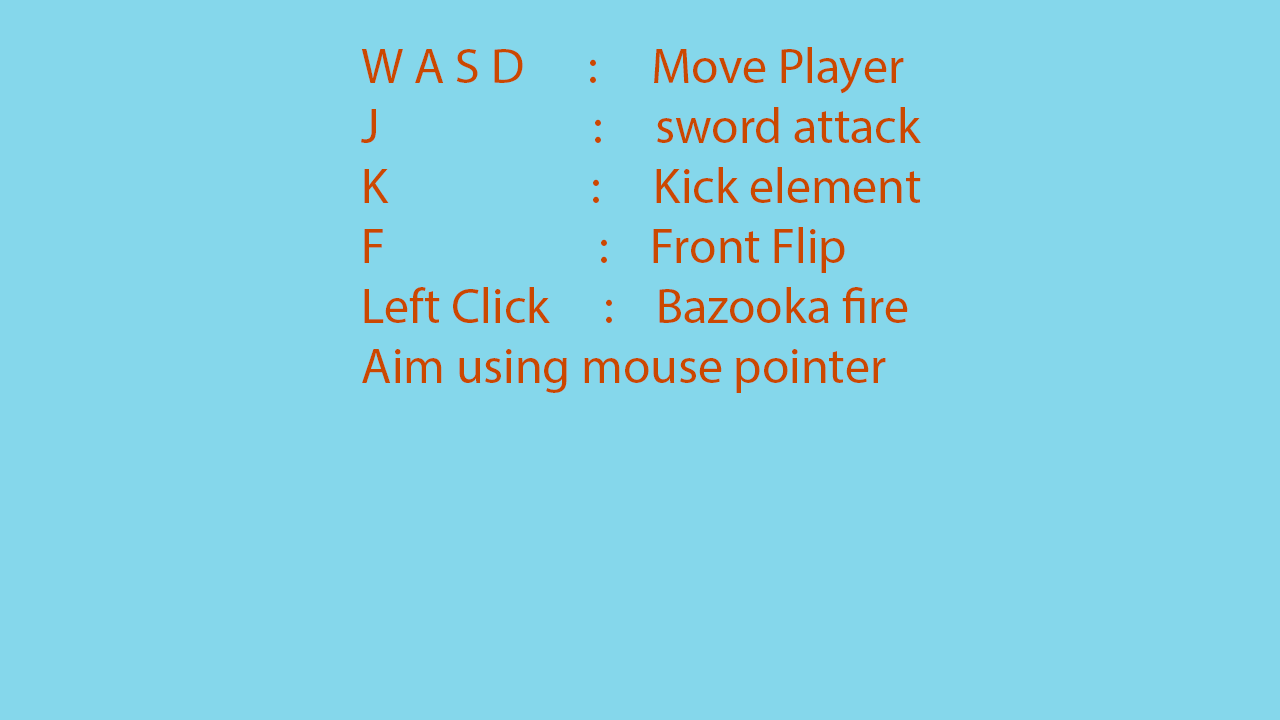
<style>
.page{position:relative;width:1280px;height:720px;background:#85d7eb}
.page>*{position:absolute;margin:0}
.t1{font:12px "MyriadPro-Regular";color:#cb4800}
</style>
<div class="page">
<p class="t1" style="left:361px;top:47px;width:560px;height:346px">W A S D      :     Move Player<br>J                    :     sword attack<br>K                   :     Kick element<br>F                    :    Front Flip<br>Left Click     :    Bazooka fire<br>Aim using mouse pointer</p>
</div>
